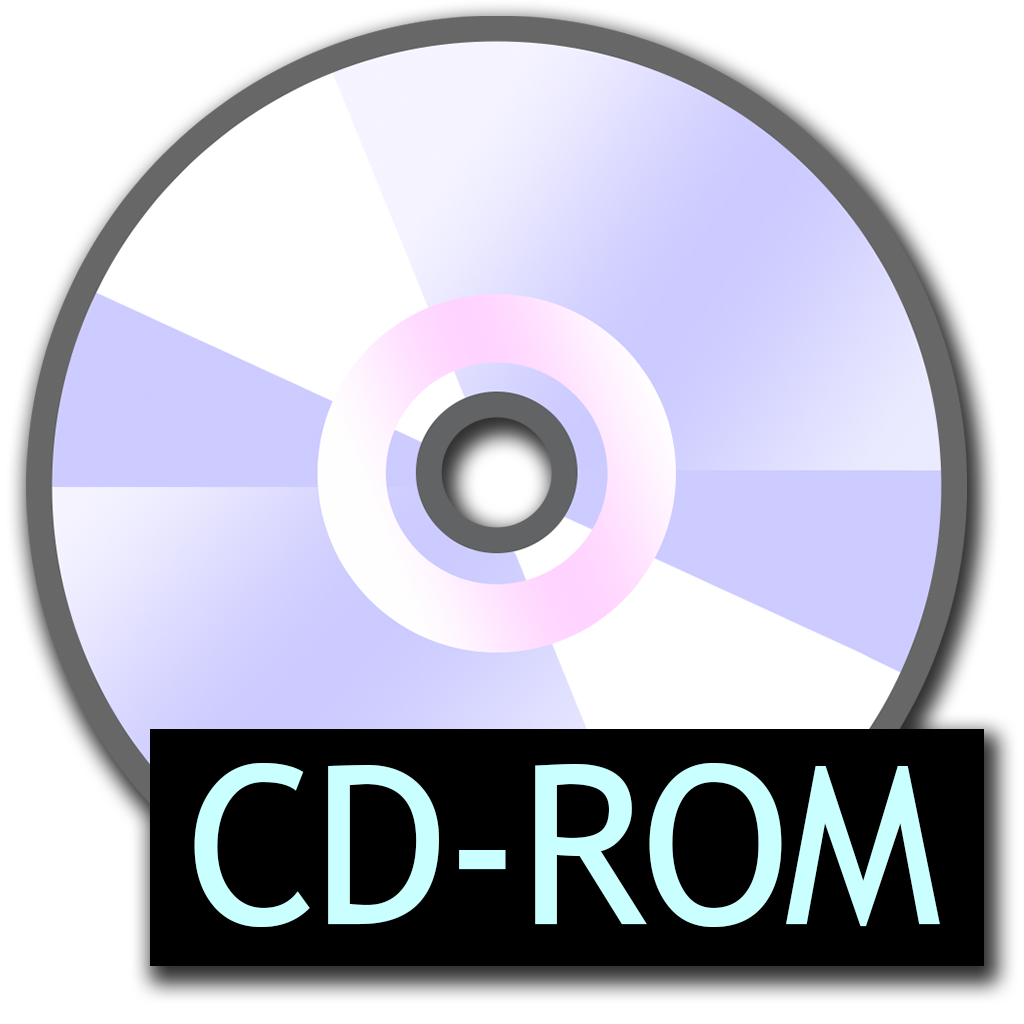
<style>
.page{position:relative;width:1024px;height:1024px;background:#ffffff}
.page>*{position:absolute;margin:0}
.t1{font:220.9px "TrebuchetMS";letter-spacing:-0.025em;color:#caffff}
</style>
<div class="page">
<p class="t1" style="left:194px;top:763px;width:746px;height:164px">CD-ROM</p>
</div>
